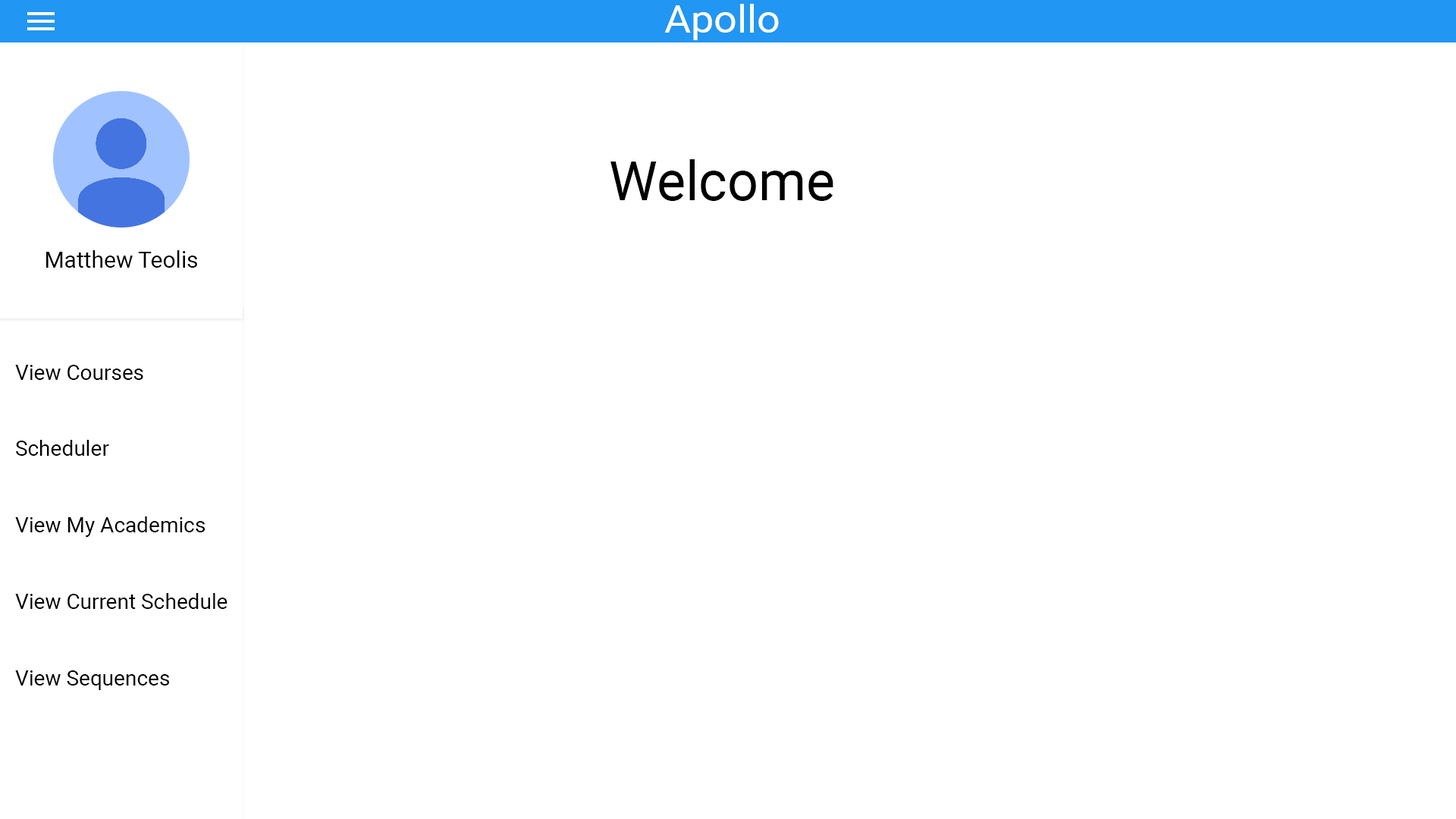
<style>
.page{position:relative;width:1456px;height:819px;background:#ffffff}
.page>*{position:absolute;margin:0}
.t1{font:37.7px "Roboto-Regular";color:#ffffff;scale:1.08 1}
.t2{font:54.6px "Roboto-Regular";color:#000000}
.t3{font:22.7px "Roboto-Regular";color:#000000}
.t4{font:21.2px "Roboto-Regular";color:#000000}
</style>
<div class="page">
<p class="t1" style="left:664px;top:4px;width:115px;height:36px">Apollo</p>
<p class="t2" style="left:610px;top:159px;width:223px;height:42px">Welcome</p>
<p class="t3" style="left:46px;top:250px;width:151px;height:18px">Matthew Teolis</p>
<p class="t4" style="left:15px;top:365px;width:212px;height:325px">View Courses<br><br><br>Scheduler<br><br><br>View My Academics<br><br><br>View Current Schedule<br><br><br>View Sequences</p>
</div>
